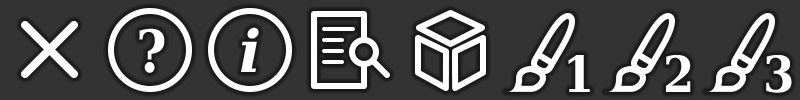
<style>
.page{position:relative;width:800px;height:100px;background:#333333}
.page>*{position:absolute;margin:0}
.t1{font:58.3px "DejaVuSerifCondensed-Bold";color:#ffffff}
.t2{font:58.3px "DejaVuSerif-BoldItalic";color:#ffffff}
.t3{font:50px "DejaVuSerifCondensed-Bold";color:#ffffff}
</style>
<div class="page">
<p class="t1" style="left:139px;top:28px;width:26px;height:45px">?</p>
<p class="t2" style="left:241px;top:27px;width:18px;height:45px">i</p>
<p class="t3" style="left:568px;top:55px;width:22px;height:37px">1</p>
<p class="t3" style="left:666px;top:55px;width:25px;height:37px">2</p>
<p class="t3" style="left:766px;top:55px;width:26px;height:38px">3</p>
</div>
